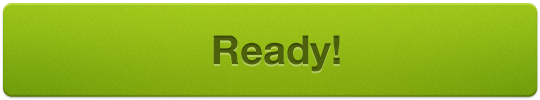
<style>
.page{position:relative;width:540px;height:100px}
.page>*{position:absolute;margin:0}
.t1{font:40px "HelveticaNeueLTStd-Bd";color:#4d610d}
</style>
<div class="page">
<p class="t1" style="left:213px;top:35px;width:127px;height:37px">Ready!</p>
</div>
